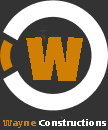
<style>
.page{position:relative;width:108px;height:130px;background:#333333}
.page>*{position:absolute;margin:0}
.t1{font:62.9px "LuckiestGuy-Regular";letter-spacing:-0.15em;color:#d07f05}
.t2{font:9.1px "Humanist777BT-BlackB";color:#ffffff}
.t3{font:9.1px "Humanist777BT-BlackB";color:#d07f05}
</style>
<div class="page">
<p class="t1" style="left:26px;top:37px;width:57px;height:44px">W</p>
<p class="t2" style="left:3px;top:119px;width:103px;height:9px"><span class="t3">Wayne </span>Constructions</p>
</div>
